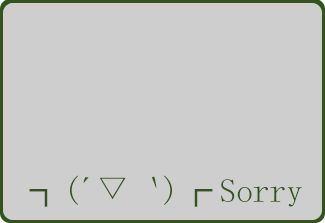
<style>
.page{position:relative;width:325px;height:223px;background:#cecece}
.page>*{position:absolute;margin:0}
.t1{font:33.3px "SimSun";color:#32531b}
</style>
<div class="page">
<p class="t1" style="left:29px;top:175px;width:273px;height:32px">┐(´▽｀)┌ Sorry</p>
</div>
